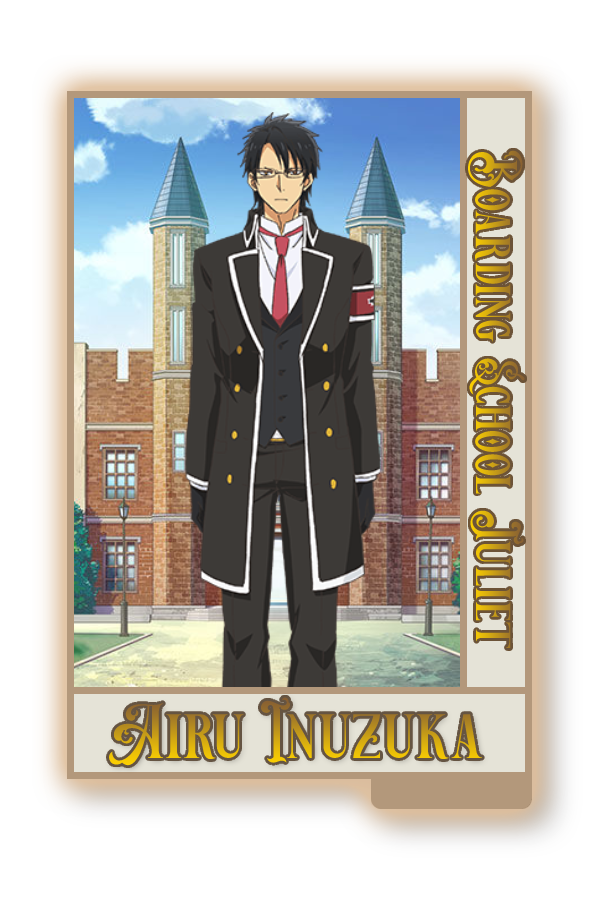
<style>
.page{position:relative;width:600px;height:900px;background:#ffffff}
.page>*{position:absolute;margin:0}
.t1{font:58.9px "VictorianDecadeDemoVersion"}
.t2{font:75px "VictorianDecadeDemoVersion"}
</style>
<div class="page">
<p class="t1" style="left:468px;top:150px;width:57px;height:498px;rotate:90deg">Boarding School Juliet</p>
<p class="t2" style="left:107px;top:697px;width:375px;height:69px">Airu Inuzuka</p>
</div>
